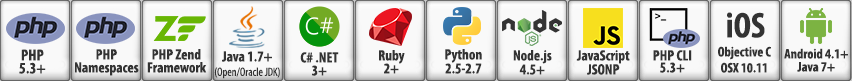
<style>
.page{position:relative;width:852px;height:81px;background:#f9f9f9}
.page>*{position:absolute;margin:0}
.t1{font:36px "MyriadPro-BoldCond";color:#333333}
.t2{font:16px/13px "MyriadPro-BoldCond";color:#333333}
.t3{font:15px/13px "MyriadPro-BoldCond";color:#333333}
.t4{font:12px "MyriadPro-Cond";color:#333333}
.t5{font:15px "MyriadPro-BoldCond";color:#333333}
.t6{font:12px "MyriadPro-Cond";letter-spacing:-0.02em;color:#333333}
.t7{font:15px/14px "MyriadPro-BoldCond";color:#333333}
.t8{font:15px/7px "MyriadPro-BoldCond";color:#333333}
.t9{font:15px/12px "MyriadPro-BoldCond";color:#333333}
.t10{font:14px/8px "MyriadPro-BoldCond";color:#333333}
.t11{font:14px/13px "MyriadPro-BoldCond";color:#333333}
</style>
<div class="page">
<p class="t1" style="left:727px;top:12px;width:38px;height:26px">iOS</p>
<p class="t2" style="left:19px;top:49px;width:27px;height:25px;text-align:center">PHP<br>5.3+</p>
<p class="t3" style="left:75px;top:49px;width:64px;height:27px;text-align:center">PHP<br>Namespaces</p>
<p class="t3" style="left:147px;top:49px;width:60px;height:24px;text-align:center">PHP Zend<br>Framework</p>
<p class="t4" style="left:214px;top:51px;width:66px;height:28px;text-align:center"><span class="t5">Java 1.7+<br></span>(Open/Oracle <span class="t6">JDK)</span></p>
<p class="t3" style="left:300px;top:52px;width:39px;height:24px;text-align:center">C# .NET<br>3+</p>
<p class="t3" style="left:379px;top:50px;width:26px;height:24px;text-align:center">Ruby<br>2+</p>
<p class="t7" style="left:445px;top:49px;width:37px;height:25px;text-align:center">Python<br>2.5-2.7</p>
<p class="t8" style="left:513px;top:50px;width:39px;height:25px;text-align:center">Node.js<br><br>4.5+</p>
<p class="t7" style="left:576px;top:50px;width:54px;height:25px;text-align:center">JavaScript<br>JSONP</p>
<p class="t9" style="left:653px;top:50px;width:39px;height:23px;text-align:center">PHP CLI<br>5.3+</p>
<p class="t10" style="left:718px;top:46px;width:53px;height:27px;text-align:center">Objective C<br><br>OSX 10.11</p>
<p class="t11" style="left:784px;top:48px;width:64px;height:24px;text-align:center">Android 4.1+<br>Java 7+</p>
</div>
